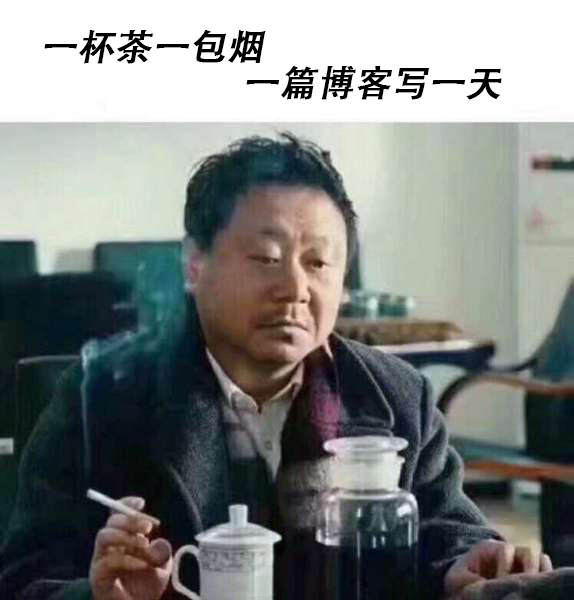
<style>
.page{position:relative;width:574px;height:600px}
.page>*{position:absolute;margin:0}
.t1{font:36px/36px "STHeitiSC-Medium";color:#000000;font-weight:bold;font-style:italic}
</style>
<div class="page">
<p class="t1" style="left:44px;top:30px;width:458px;height:70px;text-align:center">一杯茶一包烟<br>                               一篇博客写一天</p>
</div>
